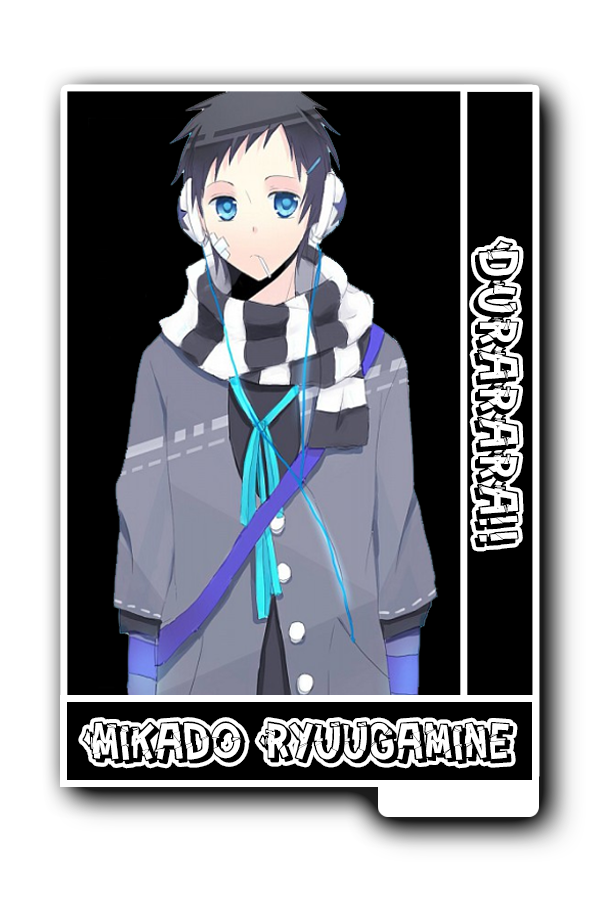
<style>
.page{position:relative;width:600px;height:900px;background:#ffffff}
.page>*{position:absolute;margin:0}
.t1{font:61px "PeintureFraiche";color:#000000}
.t2{font:57px "PeintureFraiche";color:#000000}
</style>
<div class="page">
<p class="t1" style="left:473px;top:239px;width:47px;height:309px;rotate:90deg">DURARARA!!</p>
<p class="t2" style="left:82px;top:721px;width:432px;height:44px">Mikado Ryuugamine</p>
</div>
